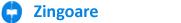
<style>
.page{position:relative;width:181px;height:23px;background:#ffffff}
.page>*{position:absolute;margin:0}
.t1{font:18px "Calibri-Bold";color:#0784e3}
</style>
<div class="page">
<p class="t1" style="left:34px;top:5px;width:64px;height:16px">Zingoare</p>
</div>
